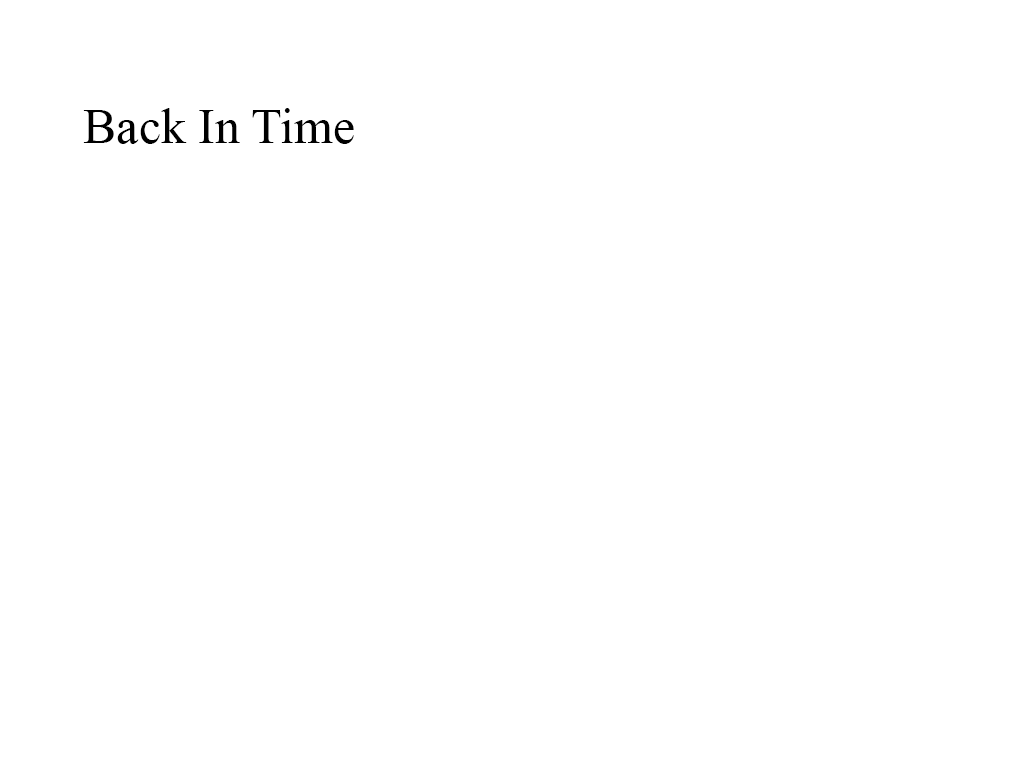
<style>
.page{position:relative;width:1024px;height:768px;background:#ffffff}
.page>*{position:absolute;margin:0}
.t1{font:50px "MyriadPro-Regular";color:#000000}
</style>
<div class="page">
<p class="t1" style="left:83px;top:108px;width:271px;height:36px">Back In Time</p>
</div>
